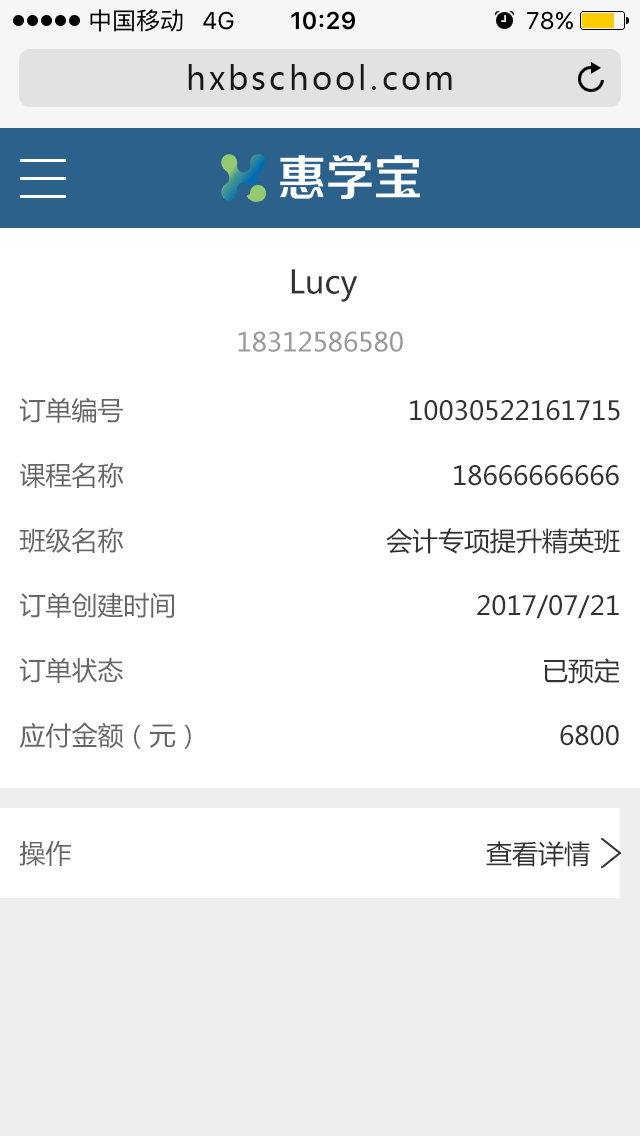
<style>
.page{position:relative;width:640px;height:1136px;background:#ffffff}
.page>*{position:absolute;margin:0}
.t1{font:32px "MicrosoftYaHei";letter-spacing:0.1em;color:#171717}
.t2{font:32px "MicrosoftYaHei";color:#333333}
.t3{font:26px "MicrosoftYaHei";color:#999999}
.t4{font:26px "MicrosoftYaHei";color:#666666}
.t5{font:26px "MicrosoftYaHei";color:#333333}
</style>
<div class="page">
<p class="t1" style="left:188px;top:64px;width:264px;height:26px">hxbschool.com</p>
<p class="t2" style="left:291px;top:269px;width:67px;height:33px">Lucy</p>
<p class="t3" style="left:238px;top:331px;width:165px;height:21px">18312586580</p>
<p class="t4" style="left:19px;top:397px;width:104px;height:26px">订单编号</p>
<p class="t5" style="left:410px;top:400px;width:210px;height:21px">10030522161715</p>
<p class="t4" style="left:20px;top:462px;width:104px;height:26px">课程名称</p>
<p class="t5" style="left:454px;top:465px;width:165px;height:21px">18666666666</p>
<p class="t4" style="left:19px;top:527px;width:105px;height:26px">班级名称</p>
<p class="t5" style="left:386px;top:528px;width:234px;height:26px">会计专项提升精英班</p>
<p class="t4" style="left:19px;top:592px;width:155px;height:26px">订单创建时间</p>
<p class="t5" style="left:477px;top:595px;width:142px;height:24px">2017/07/21</p>
<p class="t4" style="left:19px;top:657px;width:104px;height:26px">订单状态</p>
<p class="t5" style="left:544px;top:658px;width:76px;height:26px">已预定</p>
<p class="t4" style="left:19px;top:722px;width:172px;height:27px">应付金额（元）</p>
<p class="t5" style="left:560px;top:725px;width:59px;height:21px">6800</p>
<p class="t4" style="left:19px;top:840px;width:52px;height:26px">操作</p>
<p class="t5" style="left:486px;top:841px;width:104px;height:26px">查看详情</p>
</div>
